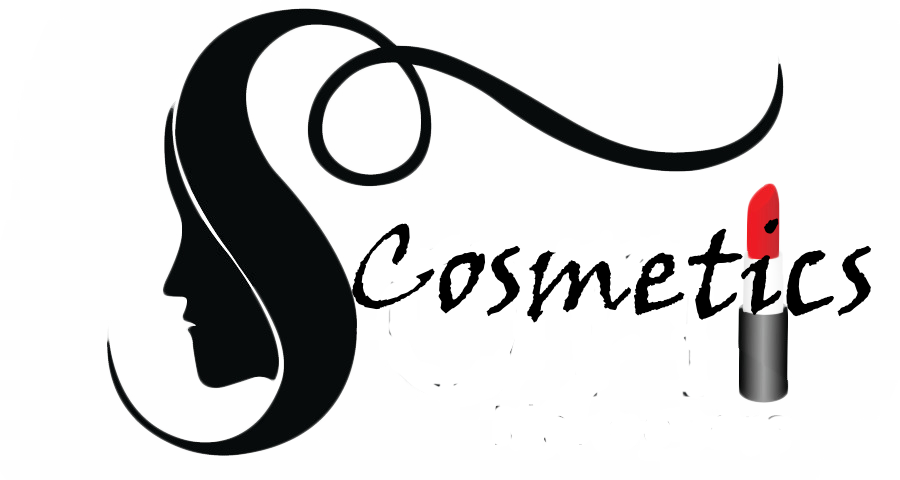
<style>
.page{position:relative;width:900px;height:480px;background:#ffffff}
.page>*{position:absolute;margin:0}
.t1{font:122px "VinerHandITC";color:#000000}
</style>
<div class="page">
<p class="t1" style="left:352px;top:218px;width:520px;height:105px">Cosmetics</p>
</div>
